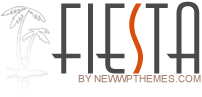
<style>
.page{position:relative;width:202px;height:97px;background:#ffffff}
.page>*{position:absolute;margin:0}
.t1{font:100px "AnnaLightCTT";color:#484a4b;text-transform:uppercase}
.t2{font:100px "AnnaLightCTT";color:#484a4b}
.t3{font:100px "AnnaLightCTT";color:#d94e0d;text-transform:uppercase}
.t4{font:10px "ArialMT";color:#a5806e;text-transform:uppercase}
</style>
<div class="page">
<p class="t1" style="left:51px;top:1px;width:149px;height:73px"><span class="t2">f</span>ie<span class="t3">s</span>ta</p>
<p class="t4" style="left:78px;top:75px;width:123px;height:8px">by NewWpThemes.com</p>
</div>
